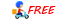
<style>
.page{position:relative;width:80px;height:20px;background:#ffffff}
.page>*{position:absolute;margin:0}
.t1{font:11px "MVBoli";color:#ff0000}
</style>
<div class="page">
<p class="t1" style="left:28px;top:6px;width:28px;height:8px">FREE</p>
</div>
